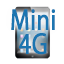
<style>
.page{position:relative;width:64px;height:64px;background:#ffffff}
.page>*{position:absolute;margin:0}
.t1{font:30px/24px "MyriadPro-Regular";color:#1c75b0;font-weight:bold;scale:0.8 1}
</style>
<div class="page">
<p class="t1" style="left:11px;top:9px;width:44px;height:46px;text-align:center">Mini<br>4G</p>
</div>
